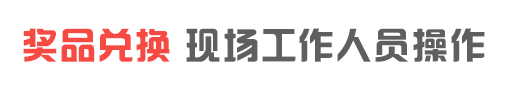
<style>
.page{position:relative;width:506px;height:93px;background:#ffffff}
.page>*{position:absolute;margin:0}
.t1{font:36px "¹ã½Ý¾ÓÃÔÄã×Ö¿â";letter-spacing:0.05em;color:#f74a43}
.t2{font:36px "¹ã½Ý¾ÓÃÔÄã×Ö¿â";letter-spacing:0.05em;color:#605f5f}
</style>
<div class="page">
<p class="t1" style="left:23px;top:28px;width:147px;height:34px">奖品兑换</p>
<p class="t2" style="left:186px;top:28px;width:299px;height:34px">现场工作人员操作</p>
</div>
